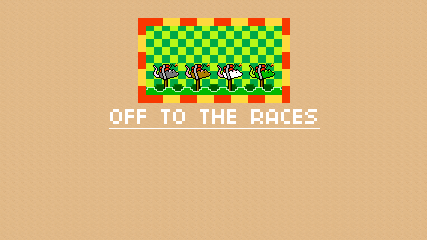
<style>
.page{position:relative;width:427px;height:240px}
.page>*{position:absolute;margin:0}
.t1{font:24px "04b03";color:#ffffff;text-decoration:underline}
</style>
<div class="page">
<p class="t1" style="left:109px;top:109px;width:211px;height:20px">OFF TO THE RACES</p>
</div>
